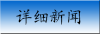
<style>
.page{position:relative;width:100px;height:34px}
.page>*{position:absolute;margin:0}
.t1{font:16.8px "-k-a-i-2";color:#000000}
</style>
<div class="page">
<p class="t1" style="left:16px;top:9px;width:65px;height:16px">详细新闻</p>
</div>
